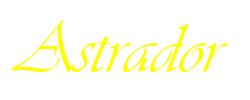
<style>
.page{position:relative;width:250px;height:100px;background:#ffffff}
.page>*{position:absolute;margin:0}
.t1{font:72px "Vivaldii";color:#fffc00}
</style>
<div class="page">
<p class="t1" style="left:11px;top:20px;width:217px;height:53px">Astrador</p>
</div>
